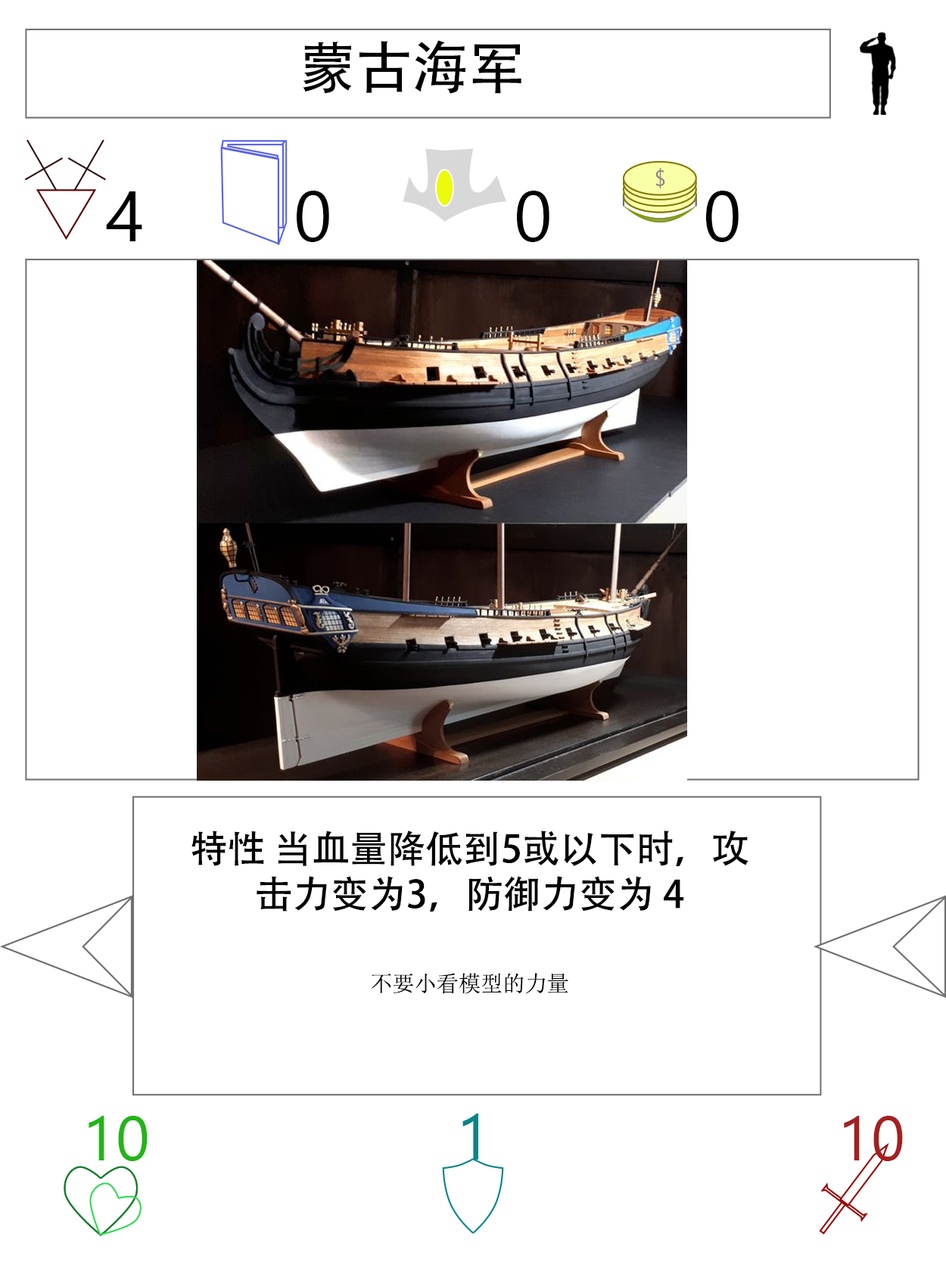
<style>
.page{position:relative;width:946px;height:1261px;background:#ffffff}
.page>*{position:absolute;margin:0}
.t1{font:56.7px "AdobeHeitiStd-Regular";color:#000000}
.t2{font:70.9px "SegoeUI";color:#000000}
.t3{font:37.8px "AdobeHeitiStd-Regular";color:#000000}
.t4{font:22.1px "NSimSun";color:#000000}
.t5{font:63px "SegoeUI";color:#22b518}
.t6{font:64.6px "SegoeUI";color:#05868a}
.t7{font:63px "SegoeUI";color:#a32020}
</style>
<div class="page">
<p class="t1" style="left:303px;top:40px;width:218px;height:54px">蒙古海军</p>
<p class="t2" style="left:106px;top:191px;width:36px;height:50px">4</p>
<p class="t2" style="left:297px;top:191px;width:32px;height:51px">0</p>
<p class="t2" style="left:517px;top:191px;width:32px;height:51px">0</p>
<p class="t2" style="left:706px;top:191px;width:32px;height:51px">0</p>
<p class="t3" style="left:191px;top:831px;width:557px;height:163px;text-align:center">特性 当血量降低到5或以下时，攻击力变为3，防御力变为 4<br><br><span class="t4">不要小看模型的力量</span></p>
<p class="t5" style="left:89px;top:1116px;width:59px;height:45px">10</p>
<p class="t6" style="left:462px;top:1114px;width:16px;height:46px">1</p>
<p class="t7" style="left:843px;top:1116px;width:59px;height:45px">10</p>
</div>
